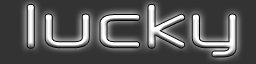
<style>
.page{position:relative;width:256px;height:64px;background:#333333}
.page>*{position:absolute;margin:0}
.t1{font:60px "NeuropolXFree"}
</style>
<div class="page">
<p class="t1" style="left:27px;top:4px;width:209px;height:53px">lucky</p>
</div>
